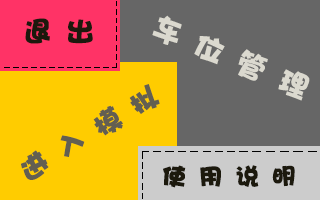
<style>
.page{position:relative;width:320px;height:200px;background:#666666}
.page>*{position:absolute;margin:0}
.t1{font:30px "DFHaiBaoW12";letter-spacing:0.005em;color:#dbd9cf}
.t2{font:28px "DFHaiBaoW12";letter-spacing:0.005em;color:#1c190d}
.t3{font:28px "DFHaiBaoW12";letter-spacing:0.005em;color:#635f51}
.t4{font:24px "DFHaiBaoW12";letter-spacing:0.005em;color:#1c190d}
</style>
<div class="page">
<p class="t1" style="left:152px;top:15px;width:158px;height:86px;rotate:23deg">车 位 管 理</p>
<p class="t2" style="left:25px;top:18px;width:68px;height:26px">退 出</p>
<p class="t3" style="left:21px;top:84px;width:139px;height:96px;rotate:-31deg">进 入 模 拟</p>
<p class="t4" style="left:163px;top:165px;width:132px;height:23px">使 用 说 明</p>
</div>
